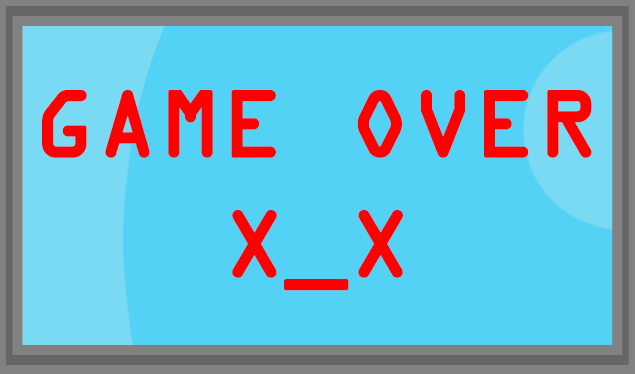
<style>
.page{position:relative;width:635px;height:374px;background:#53d2f5}
.page>*{position:absolute;margin:0}
.t1{font:100px "OCRAExtended";color:#ff0000;font-weight:bold}
</style>
<div class="page">
<p class="t1" style="left:42px;top:89px;width:550px;height:202px;text-align:center">GAME OVER<br>X_X</p>
</div>
